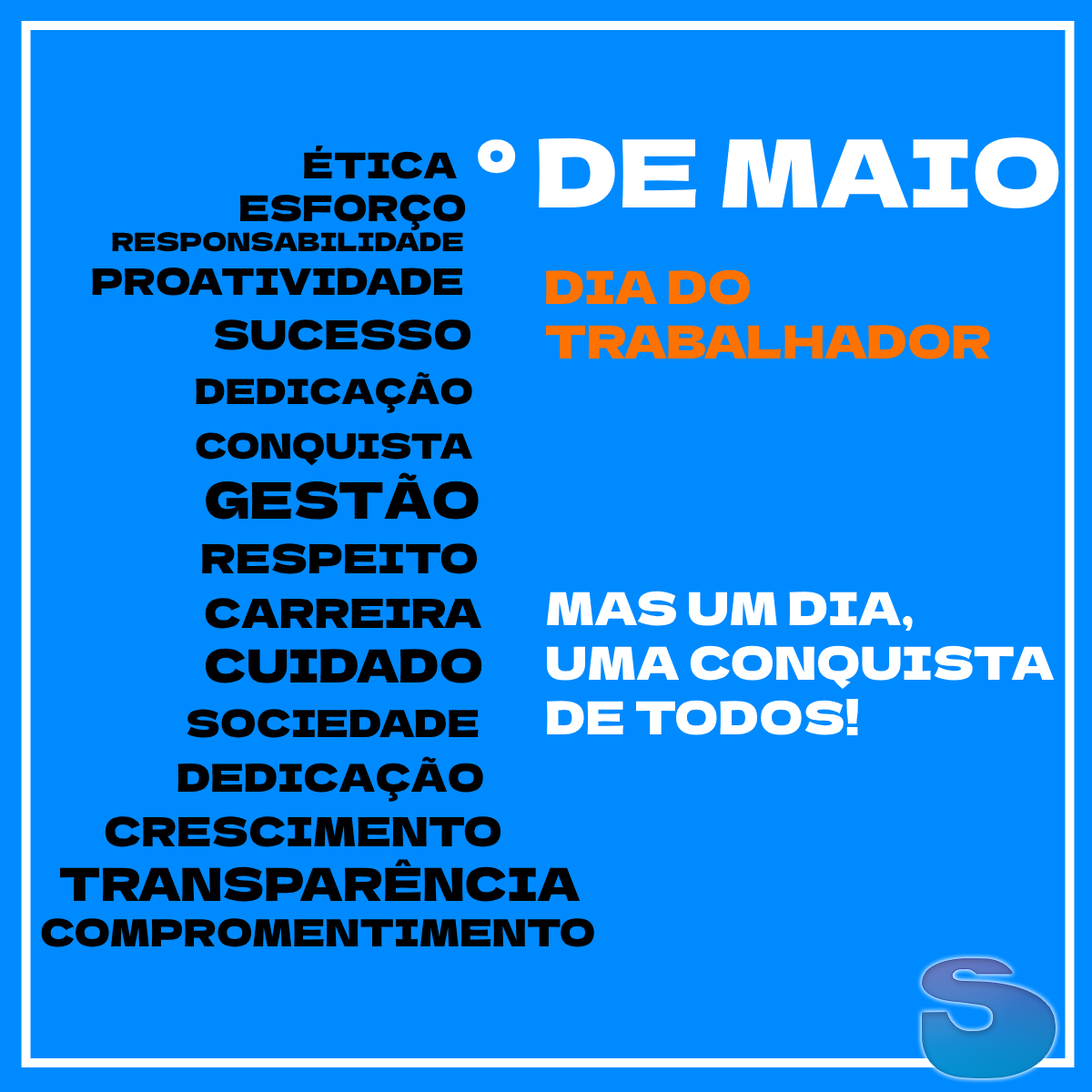
<style>
.page{position:relative;width:1092px;height:1092px;background:#008aff}
.page>*{position:absolute;margin:0}
.t1{font:93.7px "DelaGothicOne-Regular";color:#ffffff}
.t2{font:93.7px "DelaGothicOne-Regular";color:#000000}
.t3{font:35.5px "DelaGothicOne-Regular";color:#000000}
.t4{font:25.5px "DelaGothicOne-Regular";color:#000000}
.t5{font:36.4px "DelaGothicOne-Regular";color:#000000}
.t6{font:40px "DelaGothicOne-Regular";color:#000000}
.t7{font:34.6px "DelaGothicOne-Regular";color:#000000}
.t8{font:50px "DelaGothicOne-Regular";color:#000000}
.t9{font:45.5px "DelaGothicOne-Regular";color:#000000}
.t10{font:37.3px "DelaGothicOne-Regular";color:#000000}
.t11{font:38.2px "DelaGothicOne-Regular";color:#000000}
.t12{font:45.5px "DelaGothicOne-Regular";color:#ff7200}
.t13{font:45.5px "DelaGothicOne-Regular";color:#ffffff}
</style>
<div class="page">
<p class="t1" style="left:478px;top:137px;width:581px;height:72px"><span class="t2"><br></span>° DE MAIO</p>
<p class="t3" style="left:41px;top:146px;width:553px;height:801px">ÉTICA<br>                            ESFORÇO<br>              <span class="t4">RESPONSABILIDADE<br>          </span><span class="t5">PROATIVIDADE<br>                   </span><span class="t6">SUCESSO<br>                 </span><span class="t7">DEDICAÇÃO<br>                 CONQUISTA<br>                  </span><span class="t8">GESTÃO<br>                  </span><span class="t6">RESPEITO<br>                  CARREIRA<br>                  </span><span class="t9">CUIDADO<br>                </span><span class="t10">SOCIEDADE<br>               </span><span class="t11">DEDICAÇÃO<br>       </span><span class="t6">CRESCIMENTO<br>  </span><span class="t9">TRANSPARÊNCIA<br></span><span class="t10">COMPROMENTIMENTO</span></p>
<p class="t12" style="left:546px;top:269px;width:444px;height:90px">DIA DO<br>TRABALHADOR</p>
<p class="t13" style="left:546px;top:591px;width:509px;height:144px">MAS UM DIA,<br>UMA CONQUISTA<br>DE TODOS!</p>
</div>
